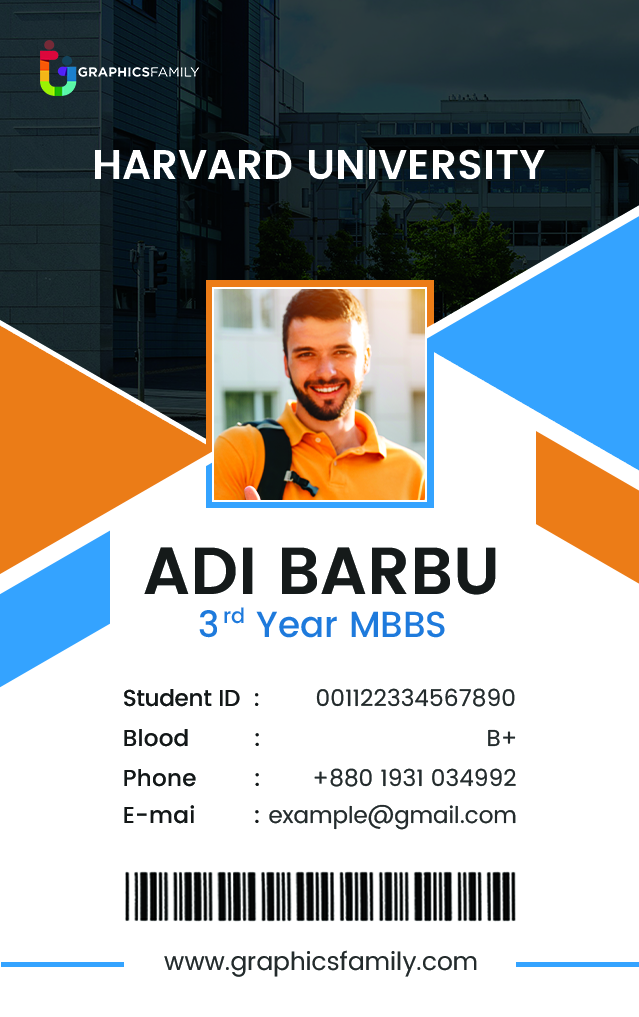
<style>
.page{position:relative;width:639px;height:1017px;background:#ffffff}
.page>*{position:absolute;margin:0}
.t1{font:41.4px "Poppins-SemiBold";color:#ffffff;text-transform:uppercase}
.t2{font:66.4px "Poppins-SemiBold";color:#151a1b;text-transform:uppercase}
.t3{font:36.2px "Poppins-Medium";color:#1e7bdd;text-transform:uppercase}
.t4{font:21.1px "Poppins-Medium";color:#1e7bdd}
.t5{font:36.2px "Poppins-Medium";color:#1e7bdd}
.t6{font:23px "Poppins-Regular";letter-spacing:0.005em;color:#242b2c}
.t7{font:23px "Poppins-Medium";letter-spacing:-0.012em;color:#131717}
.t8{font:23px "Poppins-Medium";letter-spacing:0.01em;color:#131717}
.t9{font:23px "Poppins-Regular";letter-spacing:-0.006em;color:#242b2c}
.t10{font:23px "Poppins-Regular";letter-spacing:0.004em;color:#242b2c}
.t11{font:23px "Poppins-Medium";letter-spacing:0.015em;color:#131717}
.t12{font:23px "Poppins-Medium";letter-spacing:0.001em;color:#131717}
.t13{font:23px "Poppins-Regular";color:#242b2c}
.t14{font:25px "Poppins-Regular";color:#242b2c}
</style>
<div class="page">
<p class="t1" style="left:95px;top:149px;width:450px;height:31px">Harvard University</p>
<p class="t2" style="left:144px;top:547px;width:352px;height:48px">Adi barbu</p>
<p class="t3" style="left:199px;top:610px;width:18px;height:28px">3</p>
<p class="t4" style="left:224px;top:607px;width:20px;height:17px">rd</p>
<p class="t5" style="left:256px;top:611px;width:189px;height:27px">Year MBBS</p>
<p class="t6" style="left:124px;top:688px;width:391px;height:19px"><span class="t7">Student ID  :        </span>001122334567890</p>
<p class="t8" style="left:124px;top:729px;width:392px;height:18px">Blood         :                               <span class="t9">B+</span></p>
<p class="t10" style="left:124px;top:768px;width:392px;height:19px"><span class="t11">Phone    </span><span class="t12">    :       </span>+880 1931 034992</p>
<p class="t13" style="left:124px;top:804px;width:392px;height:26px"><span class="t11">E-mai        : </span>example@gmail.com</p>
<p class="t14" style="left:164px;top:950px;width:313px;height:27px">www.graphicsfamily.com</p>
</div>
